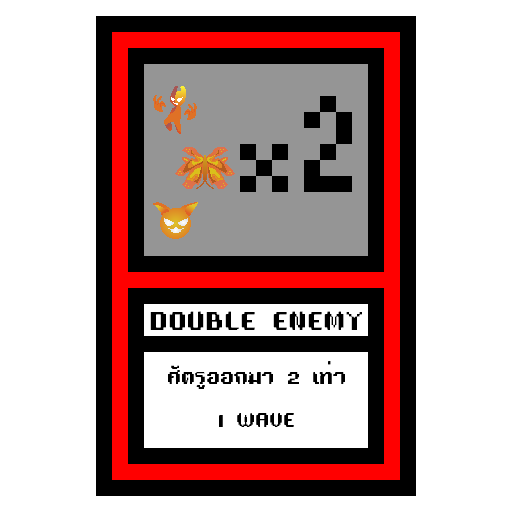
<style>
.page{position:relative;width:512px;height:512px;background:#ffffff}
.page>*{position:absolute;margin:0}
.t1{font:24px "TA16BIT-Regular";color:#000000}
.t2{font:18px "TA16BIT-Regular";color:#000000}
</style>
<div class="page">
<p class="t1" style="left:150px;top:311px;width:212px;height:19px">DOUBLE ENEMY</p>
<p class="t2" style="left:168px;top:361px;width:177px;height:66px;text-align:center">ศัตรูออกมา 2 เท่า<br><br>1 WAVE</p>
</div>
